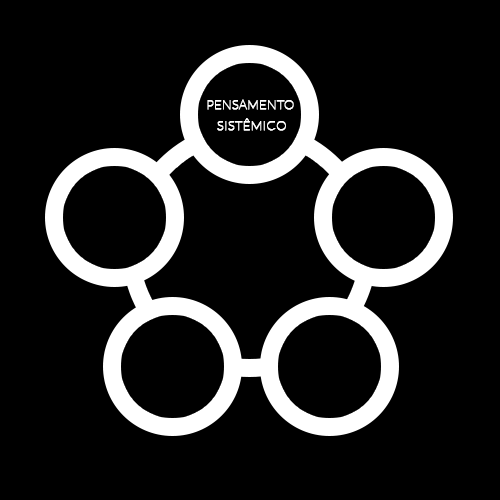
<style>
.page{position:relative;width:500px;height:500px;background:#000000}
.page>*{position:absolute;margin:0}
.t1{font:12.8px/20.8px "Lato-Hairline";color:#ffffff;font-weight:bold}
</style>
<div class="page">
<p class="t1" style="left:207px;top:99px;width:87px;height:32px;text-align:center">PENSAMENTO <br>SISTÊMICO</p>
</div>
